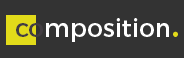
<style>
.page{position:relative;width:184px;height:58px;background:#333333}
.page>*{position:absolute;margin:0}
.t1{font:25px "Montserrat-Regular";color:#ffffff}
.t2{font:25px "Montserrat-Regular";color:#423d42}
.t3{font:40px "Montserrat-Regular";color:#e2db1a}
</style>
<div class="page">
<p class="t1" style="left:16px;top:18px;width:162px;height:24px"><span class="t2">co</span>mposition<span class="t3">.</span></p>
</div>
